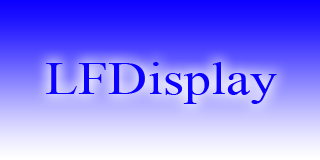
<style>
.page{position:relative;width:320px;height:160px}
.page>*{position:absolute;margin:0}
.t1{font:45.4px "TimesNewRomanPSMT";color:#0c00ff;scale:1.2 1}
</style>
<div class="page">
<p class="t1" style="left:46px;top:62px;width:231px;height:42px">LFDisplay</p>
</div>
